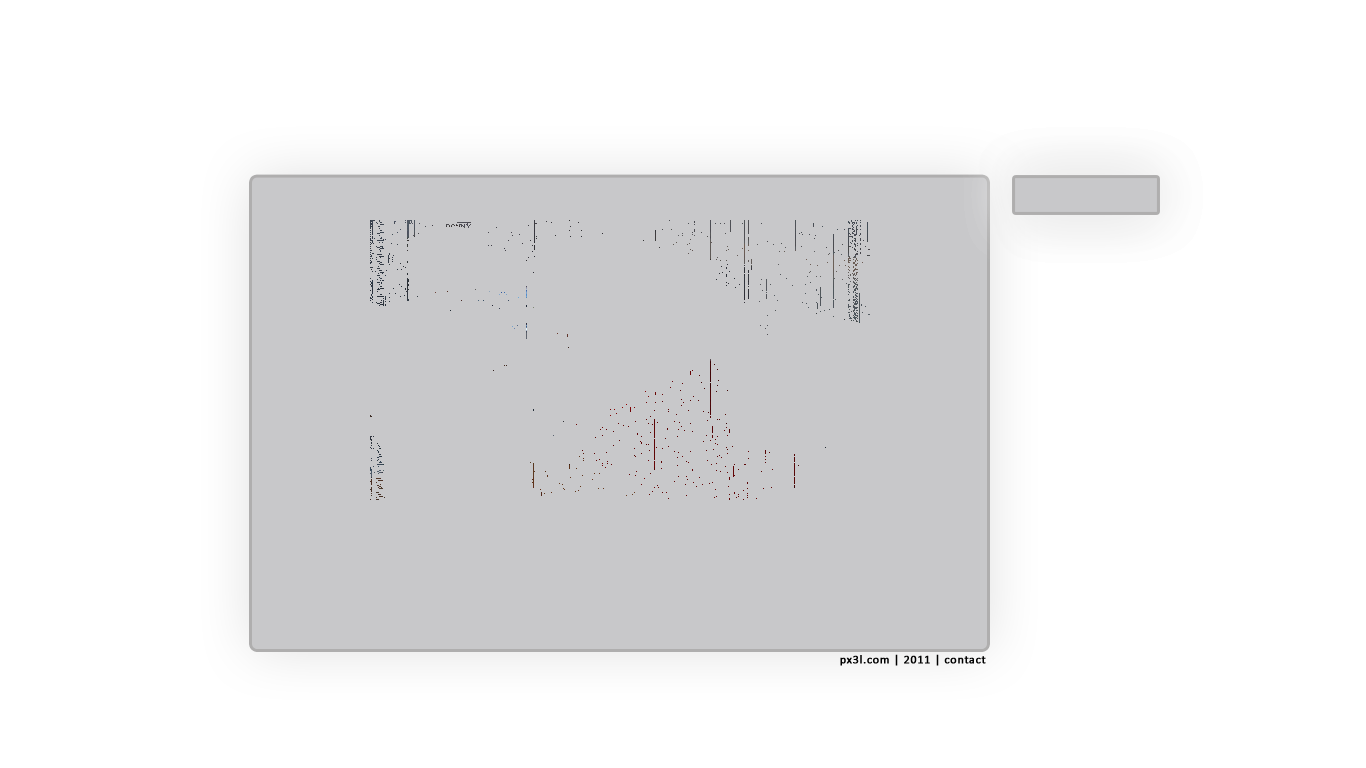
<style>
.page{position:relative;width:1366px;height:768px;background:#ffffff}
.page>*{position:absolute;margin:0}
.t1{font:12px "Calibri";letter-spacing:0.04em;color:#000000;font-weight:bold}
</style>
<div class="page">
<p class="t1" style="left:840px;top:654px;width:146px;height:12px">px3l.com | 2011 | contact</p>
</div>
